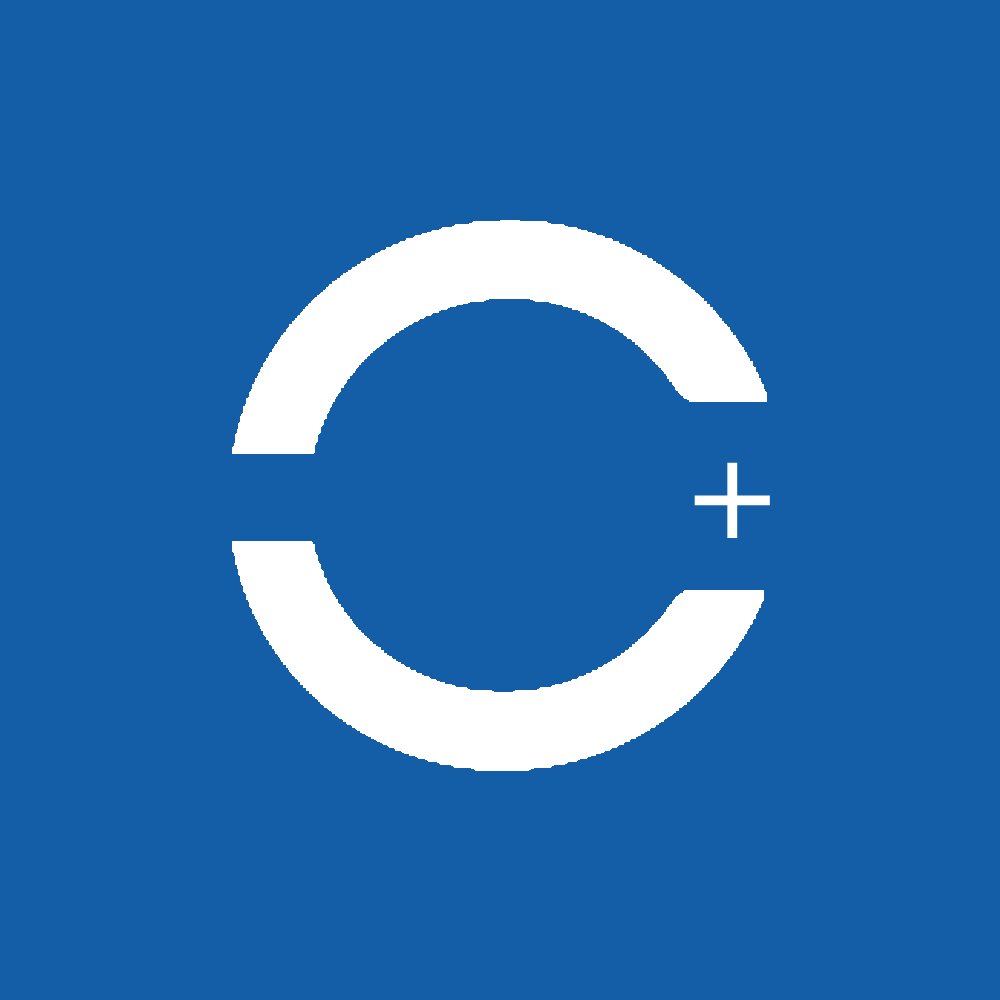
<style>
.page{position:relative;width:1000px;height:1000px;background:#145ea8}
.page>*{position:absolute;margin:0}
.t1{font:120px "DejaVuSans";color:#ffffff}
</style>
<div class="page">
<p class="t1" style="left:694px;top:462px;width:76px;height:76px">+</p>
</div>
